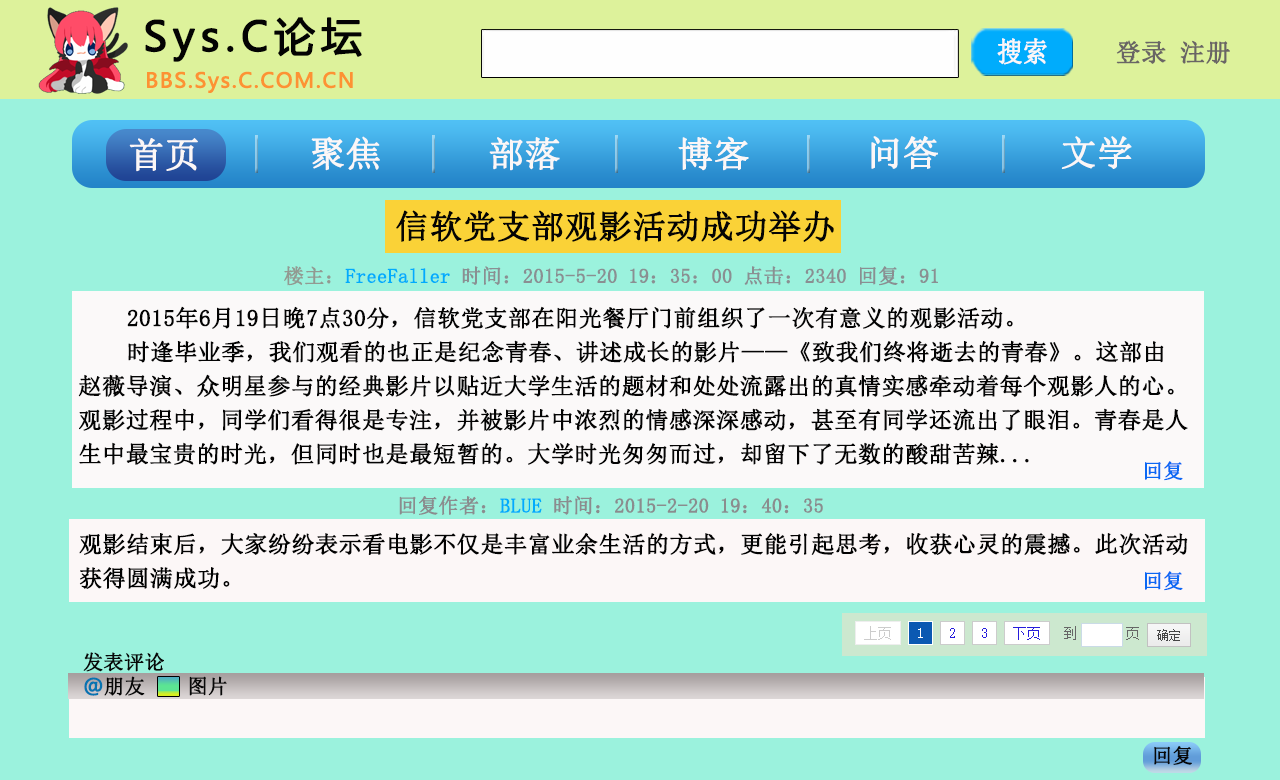
<style>
.page{position:relative;width:1280px;height:780px;background:#9bf2dd}
.page>*{position:absolute;margin:0}
.t1{font:40.2px "MicrosoftYaHei";letter-spacing:0.12em;color:#030303;font-weight:bold}
.t2{font:27.7px "SimSun";color:#fbf7f7;font-weight:bold;scale:0.91 1}
.t3{font:25px "SimSun";color:#696565;font-weight:bold}
.t4{font:20.1px "MicrosoftYaHei";letter-spacing:0.06em;color:#fd9233;font-weight:bold}
.t5{font:35.2px "SimSun";color:#fbf7f7;font-weight:bold}
.t6{font:33px "SimSun";color:#040404;font-weight:bold}
.t7{font:20px "SimSun";color:#8a8f92;font-weight:bold}
.t8{font:20px "SimSun";color:#929a92;font-weight:bold}
.t9{font:20px "SimSun";color:#00acfc;font-weight:bold}
.t10{font:23px/34px "SimSun";color:#040404;font-weight:bold}
.t11{font:20px "SimSun";color:#0b68f4;font-weight:bold}
.t12{font:20px "SimSun";color:#8b8c8e;font-weight:bold}
.t13{font:23px/34px "SimSun";color:#020202;font-weight:bold}
.t14{font:20px "SimSun";color:#080808;font-weight:bold}
.t15{font:20px "MicrosoftYaHei";color:#0774b1;font-weight:bold}
</style>
<div class="page">
<p class="t1" style="left:145px;top:17px;width:217px;height:45px">Sys.C论坛</p>
<p class="t2" style="left:997px;top:38px;width:50px;height:27px">搜索</p>
<p class="t3" style="left:1116px;top:40px;width:114px;height:24px">登录 注册</p>
<p class="t4" style="left:147px;top:71px;width:206px;height:22px">BBS.Sys.C.COM.CN</p>
<p class="t5" style="left:311px;top:136px;width:69px;height:35px">聚焦</p>
<p class="t5" style="left:489px;top:137px;width:71px;height:34px">部落</p>
<p class="t5" style="left:678px;top:136px;width:71px;height:35px">博客</p>
<p class="t5" style="left:871px;top:136px;width:67px;height:34px">问答</p>
<p class="t5" style="left:1061px;top:136px;width:71px;height:33px">文学</p>
<p class="t5" style="left:129px;top:138px;width:69px;height:34px">首页</p>
<p class="t6" style="left:396px;top:210px;width:438px;height:32px">信软党支部观影活动成功举办</p>
<p class="t7" style="left:284px;top:266px;width:654px;height:20px"><span class="t8">楼主：</span><span class="t9">FreeFaller </span>时间：2015-5-20 19：35：00 点击：2340 回复：91</p>
<p class="t10" style="left:78px;top:306px;width:1110px;height:159px">2015年6月19日晚7点30分，信软党支部在阳光餐厅门前组织了一次有意义的观影活动。<br>    时逢毕业季，我们观看的也正是纪念青春、讲述成长的影片——《致我们终将逝去的青春》。这部由赵薇导演、众明星参与的经典影片以贴近大学生活的题材和处处流露出的真情实感牵动着每个观影人的心。观影过程中，同学们看得很是专注，并被影片中浓烈的情感深深感动，甚至有同学还流出了眼泪。青春是人生中最宝贵的时光，但同时也是最短暂的。大学时光匆匆而过，却留下了无数的酸甜苦辣...</p>
<p class="t11" style="left:1145px;top:461px;width:38px;height:20px">回复</p>
<p class="t12" style="left:399px;top:495px;width:424px;height:20px">回复作者：<span class="t9">BLUE </span>时间：2015-2-20 19：40：35</p>
<p class="t13" style="left:79px;top:533px;width:1109px;height:56px">观影结束后，大家纷纷表示看电影不仅是丰富业余生活的方式，更能引起思考，收获心灵的震撼。此次活动获得圆满成功。</p>
<p class="t11" style="left:1145px;top:571px;width:38px;height:20px">回复</p>
<p class="t14" style="left:83px;top:652px;width:81px;height:20px">发表评论</p>
<p class="t14" style="left:84px;top:676px;width:143px;height:20px"><span class="t15">@</span>朋友    图片</p>
<p class="t14" style="left:1154px;top:746px;width:38px;height:19px">回复</p>
</div>
